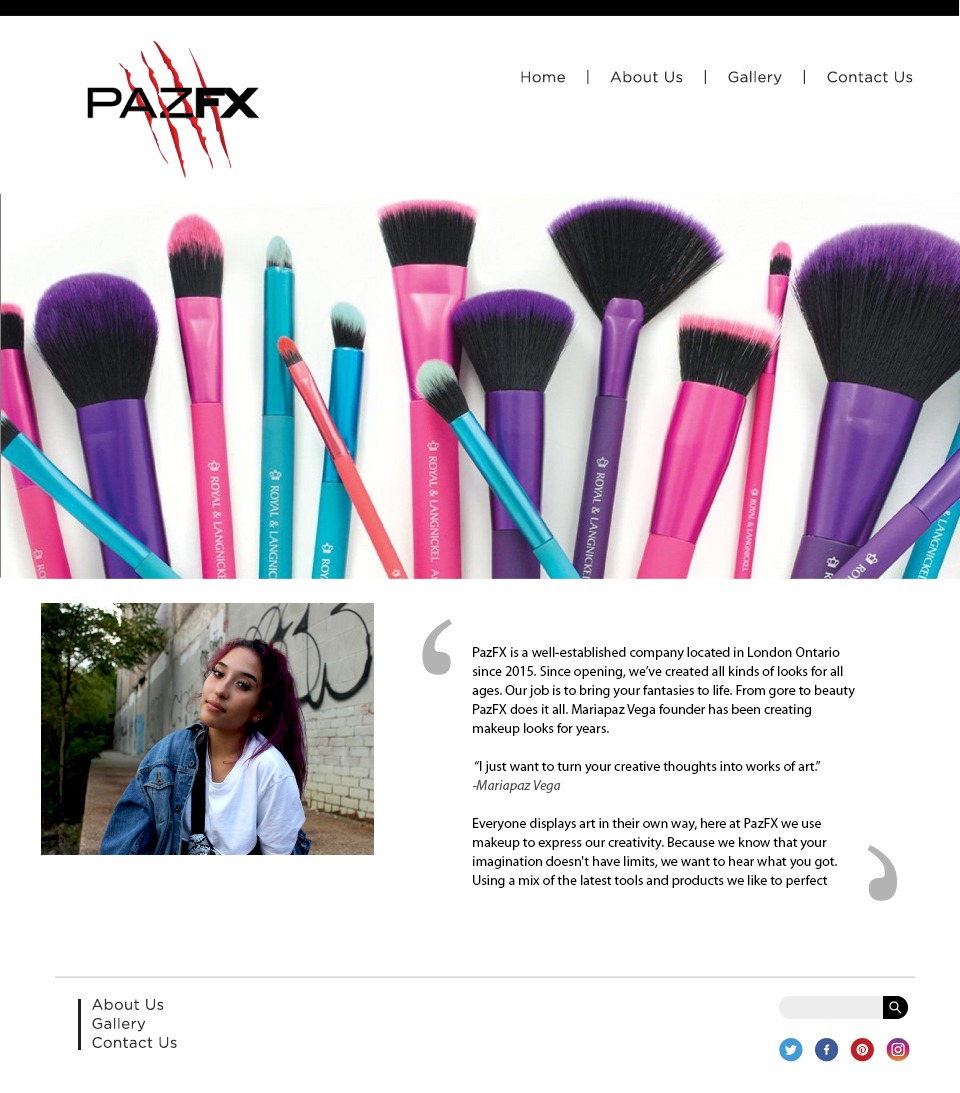
<style>
.page{position:relative;width:960px;height:1093px;background:#ffffff}
.page>*{position:absolute;margin:0}
.t1{font:15.1px "GothamBook";letter-spacing:0.025em;color:#333333}
.t2{font:14px/19px "MyriadPro-Regular";color:#000000}
.t3{font:14px/19px "MyriadPro-It";color:#4d4d4d}
.t4{font:15px/19px "GothamBook";letter-spacing:0.025em;color:#333333}
</style>
<div class="page">
<p class="t1" style="left:521px;top:70px;width:392px;height:15px">Home    |    About Us    |    Gallery    |    Contact Us</p>
<p class="t2" style="left:472px;top:647px;width:383px;height:241px">PazFX is a well-established company located in London Ontario since 2015. Since opening, we’ve created all kinds of looks for all ages. Our job is to bring your fantasies to life. From gore to beauty PazFX does it all. Mariapaz Vega founder has been creating makeup looks for years.<br><br> “I just want to turn your creative thoughts into works of art.”<br><span class="t3">-Mariapaz Vega <br></span><br>Everyone displays art in their own way, here at PazFX we use makeup to express our creativity. Because we know that your imagination doesn't have limits, we want to hear what you got. Using a mix of the latest tools and products we like to perfect<br>and detail each look to your desired liking.</p>
<p class="t4" style="left:92px;top:998px;width:85px;height:50px">About Us<br>Gallery<br>Contact Us</p>
</div>
